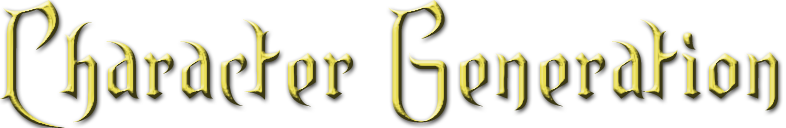
<style>
.page{position:relative;width:786px;height:128px;background:#ffffff}
.page>*{position:absolute;margin:0}
.t1{font:82px "Endor";letter-spacing:0.05em}
</style>
<div class="page">
<p class="t1" style="left:0px;top:0px;width:778px;height:128px">Character Generation</p>
</div>
